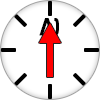
<style>
.page{position:relative;width:100px;height:100px;background:#ffffff}
.page>*{position:absolute;margin:0}
.t1{font:24px "Aurebesh";letter-spacing:0.075em;color:#000000;font-weight:bold}
</style>
<div class="page">
<p class="t1" style="left:39px;top:18px;width:20px;height:18px">N</p>
</div>
